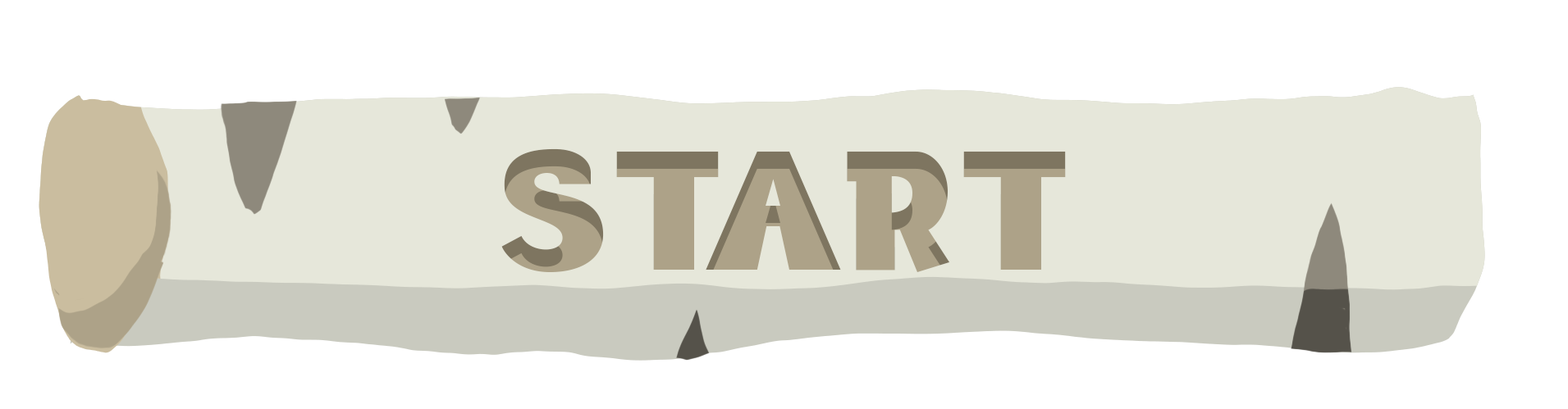
<style>
.page{position:relative;width:1568px;height:409px;background:#ffffff}
.page>*{position:absolute;margin:0}
.t1{font:164.1px "BadTyp-Regular";color:#ada288}
</style>
<div class="page">
<p class="t1" style="left:501px;top:149px;width:565px;height:123px">Start</p>
</div>
